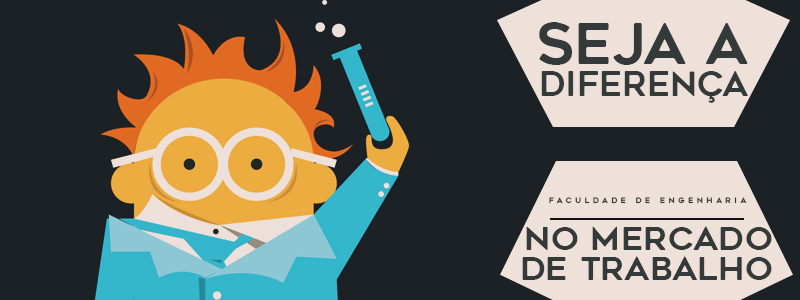
<style>
.page{position:relative;width:800px;height:300px;background:#1b2125}
.page>*{position:absolute;margin:0}
.t1{font:55.9px "GeometosRounded";color:#343a39;text-transform:uppercase}
.t2{font:34px "GeometosRounded";color:#343a39;text-transform:uppercase}
.t3{font:7.5px "GeometosRounded";letter-spacing:0.5em;color:#303636;text-transform:uppercase}
.t4{font:32.4px "GeometosRounded";color:#343a39;text-transform:uppercase;scale:1.03 1}
</style>
<div class="page">
<p class="t1" style="left:539px;top:22px;width:209px;height:43px">seja a</p>
<p class="t2" style="left:541px;top:71px;width:207px;height:32px">diferença</p>
<p class="t3" style="left:549px;top:197px;width:198px;height:7px">faculdade de engenharia</p>
<p class="t4" style="left:526px;top:226px;width:246px;height:24px">no mercado</p>
<p class="t4" style="left:522px;top:256px;width:250px;height:24px">de trabalho</p>
</div>
